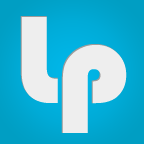
<style>
.page{position:relative;width:144px;height:144px;background:#eeeeee}
.page>*{position:absolute;margin:0}
.t1{font:130px "Bauhaus93";letter-spacing:-0.025em;color:#ffffff}
</style>
<div class="page">
<p class="t1" style="left:20px;top:16px;width:107px;height:117px">LP</p>
</div>
